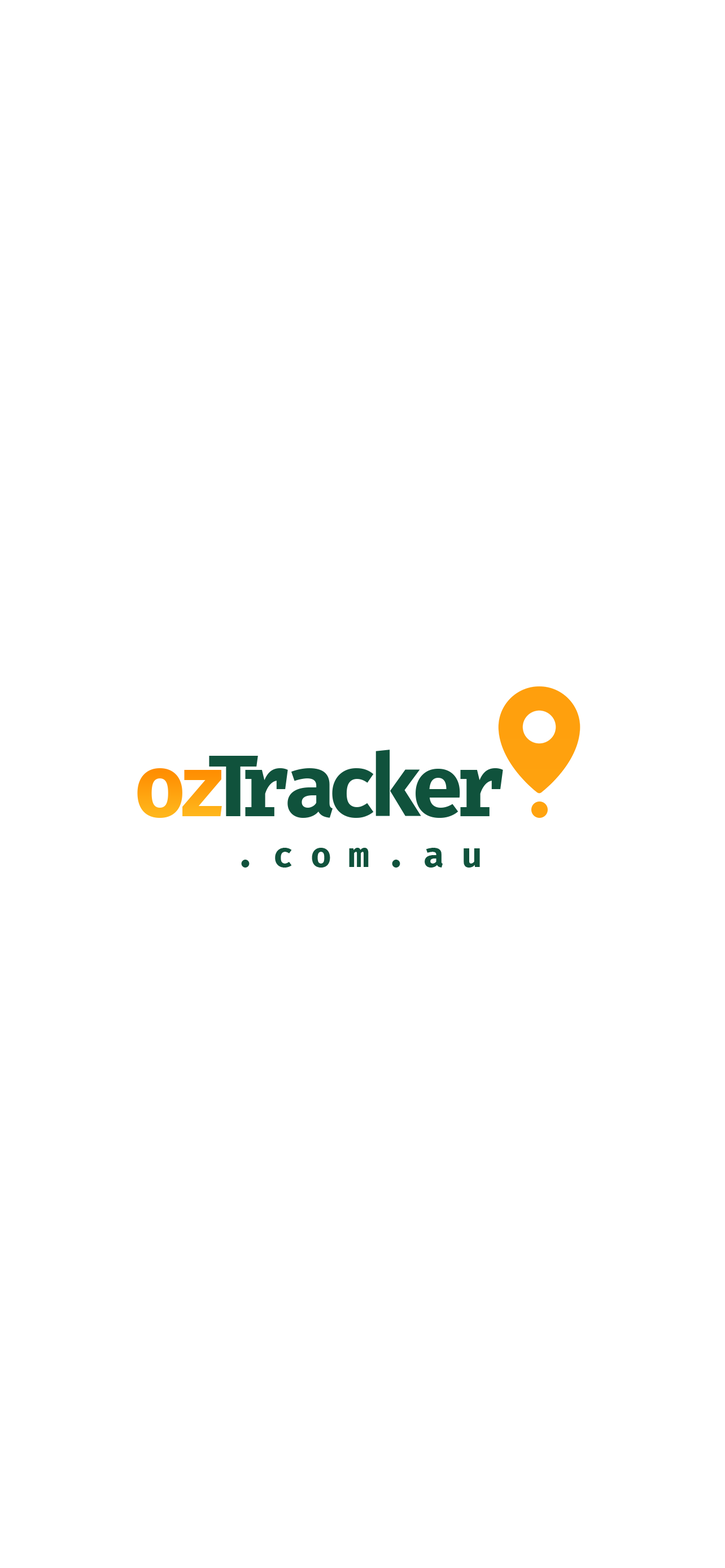
<style>
.page{position:relative;width:725px;height:1568px;background:#ffffff}
.page>*{position:absolute;margin:0}
.t1{font:84.7px "FiraCode-Bold";color:#10523c}
.t2{font:84.7px "FiraCode-Bold";color:#ffa20f}
.t3{font:33.9px "FiraCode-Bold";letter-spacing:0.5em;color:#10523c}
</style>
<div class="page">
<p class="t1" style="left:209px;top:750px;width:294px;height:68px">Tracker</p>
<p class="t2" style="left:137px;top:768px;width:85px;height:50px">oz</p>
<p class="t3" style="left:241px;top:848px;width:239px;height:20px">.com.au</p>
</div>
